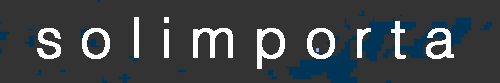
<style>
.page{position:relative;width:500px;height:83px;background:#333333}
.page>*{position:absolute;margin:0}
.t1{font:55px "Helvetica-Light";letter-spacing:0.3em;color:#ffffff;font-weight:bold}
</style>
<div class="page">
<p class="t1" style="left:37px;top:17px;width:417px;height:52px">solimporta</p>
</div>
